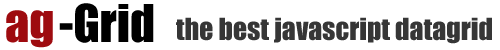
<style>
.page{position:relative;width:500px;height:50px;background:#ffffff}
.page>*{position:absolute;margin:0}
.t1{font:48px "Impact";color:#000000}
.t2{font:48px "Impact";color:#9e0b0f}
.t3{font:28px "Impact";color:#363636}
</style>
<div class="page">
<p class="t1" style="left:59px;top:3px;width:95px;height:40px">-Grid</p>
<p class="t2" style="left:6px;top:10px;width:47px;height:38px">ag</p>
<p class="t3" style="left:176px;top:17px;width:316px;height:27px">the best javascript datagrid</p>
</div>
